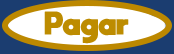
<style>
.page{position:relative;width:174px;height:54px;background:#ffffff}
.page>*{position:absolute;margin:0}
.t1{font:23.1px "moon_get-Heavy";color:#bd8c00}
</style>
<div class="page">
<p class="t1" style="left:44px;top:11px;width:85px;height:33px">Pagar</p>
</div>
